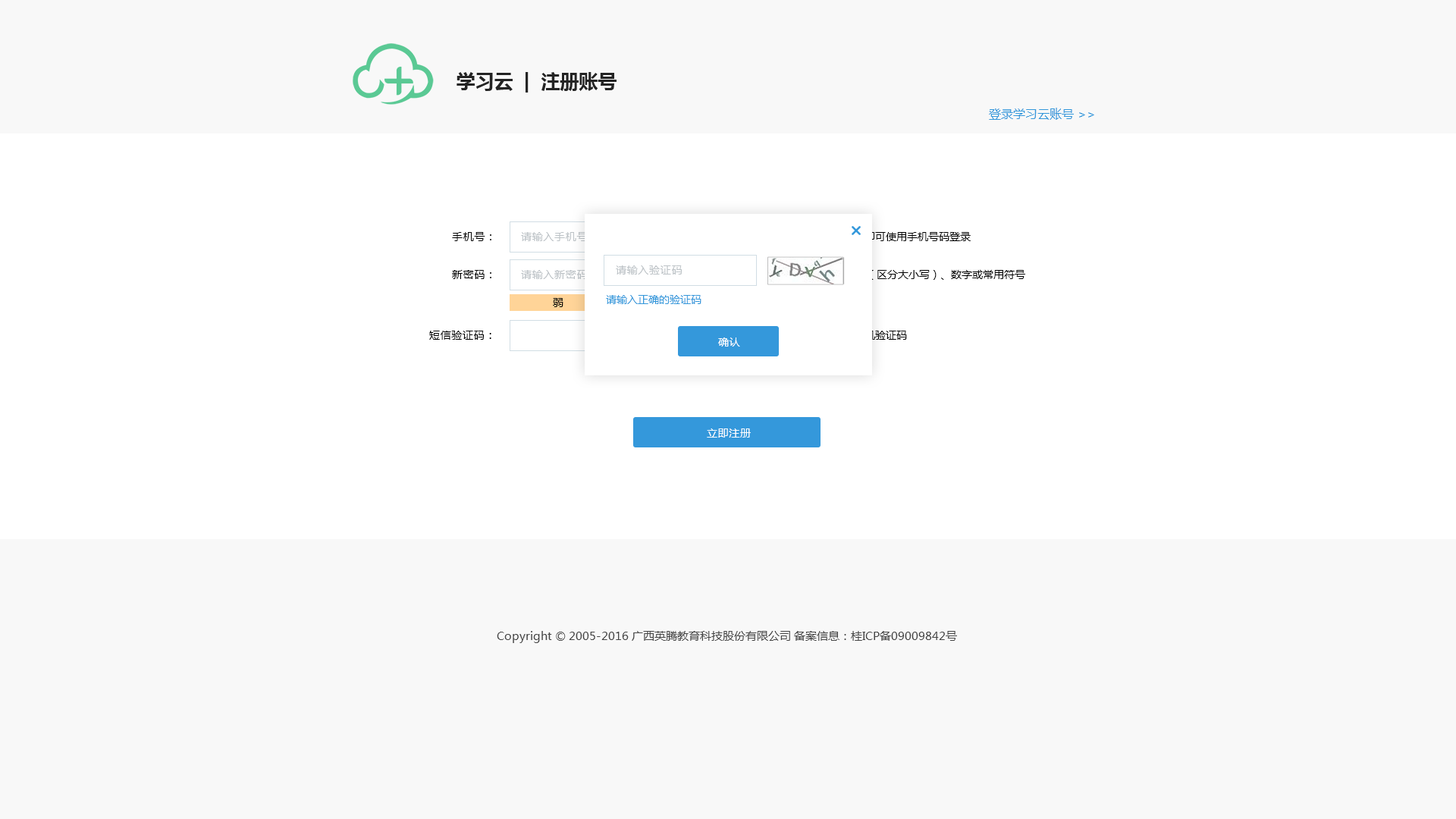
<style>
.page{position:relative;width:1456px;height:819px;background:#f8f8f8}
.page>*{position:absolute;margin:0}
.t1{font:19px "MicrosoftYaHei-Bold";color:#242424}
.t2{font:12.1px "MicrosoftYaHei";color:#3498db}
.t3{font:10.6px "MicrosoftYaHei";letter-spacing:0.05em;color:#000000}
.t4{font:10.6px "MicrosoftYaHei";letter-spacing:0.05em;color:#bdc3c7}
.t5{font:10.6px "MicrosoftYaHei";color:#000000}
.t6{font:10.6px "MicrosoftYaHei";color:#3498db}
.t7{font:10.6px "MicrosoftYaHei";letter-spacing:0.05em;color:#ffffff}
.t8{font:10.6px "MicrosoftYaHei"}
.t9{font:11.4px "MicrosoftYaHei";color:#464646}
</style>
<div class="page">
<p class="t1" style="left:457px;top:72px;width:160px;height:21px">学习云  |  注册账号</p>
<p class="t2" style="left:989px;top:108px;width:105px;height:12px">登录学习云账号 &gt;&gt;</p>
<p class="t3" style="left:452px;top:232px;width:39px;height:9px">手机号：</p>
<p class="t4" style="left:521px;top:232px;width:67px;height:9px">请输入手机号</p>
<p class="t5" style="left:811px;top:232px;width:160px;height:9px">注册成功后即可使用手机号码登录</p>
<p class="t3" style="left:452px;top:270px;width:39px;height:9px">新密码：</p>
<p class="t4" style="left:521px;top:270px;width:66px;height:9px">请输入新密码</p>
<p class="t4" style="left:616px;top:265px;width:66px;height:10px">请输入验证码</p>
<p class="t5" style="left:811px;top:270px;width:214px;height:10px">6-16，英文（区分大小写）、数字或常用符号</p>
<p class="t3" style="left:553px;top:298px;width:10px;height:9px">弱</p>
<p class="t6" style="left:606px;top:295px;width:95px;height:9px">请输入正确的验证码</p>
<p class="t3" style="left:429px;top:331px;width:62px;height:9px">短信验证码：</p>
<p class="t7" style="left:718px;top:337px;width:22px;height:10px">确认</p>
<p class="t8" style="left:811px;top:331px;width:96px;height:9px">免费获取手机验证码</p>
<p class="t7" style="left:707px;top:428px;width:44px;height:10px">立即注册</p>
<p class="t9" style="left:497px;top:631px;width:460px;height:12px">Copyright © 2005-2016 广西英腾教育科技股份有限公司 备案信息：桂ICP备09009842号</p>
</div>
